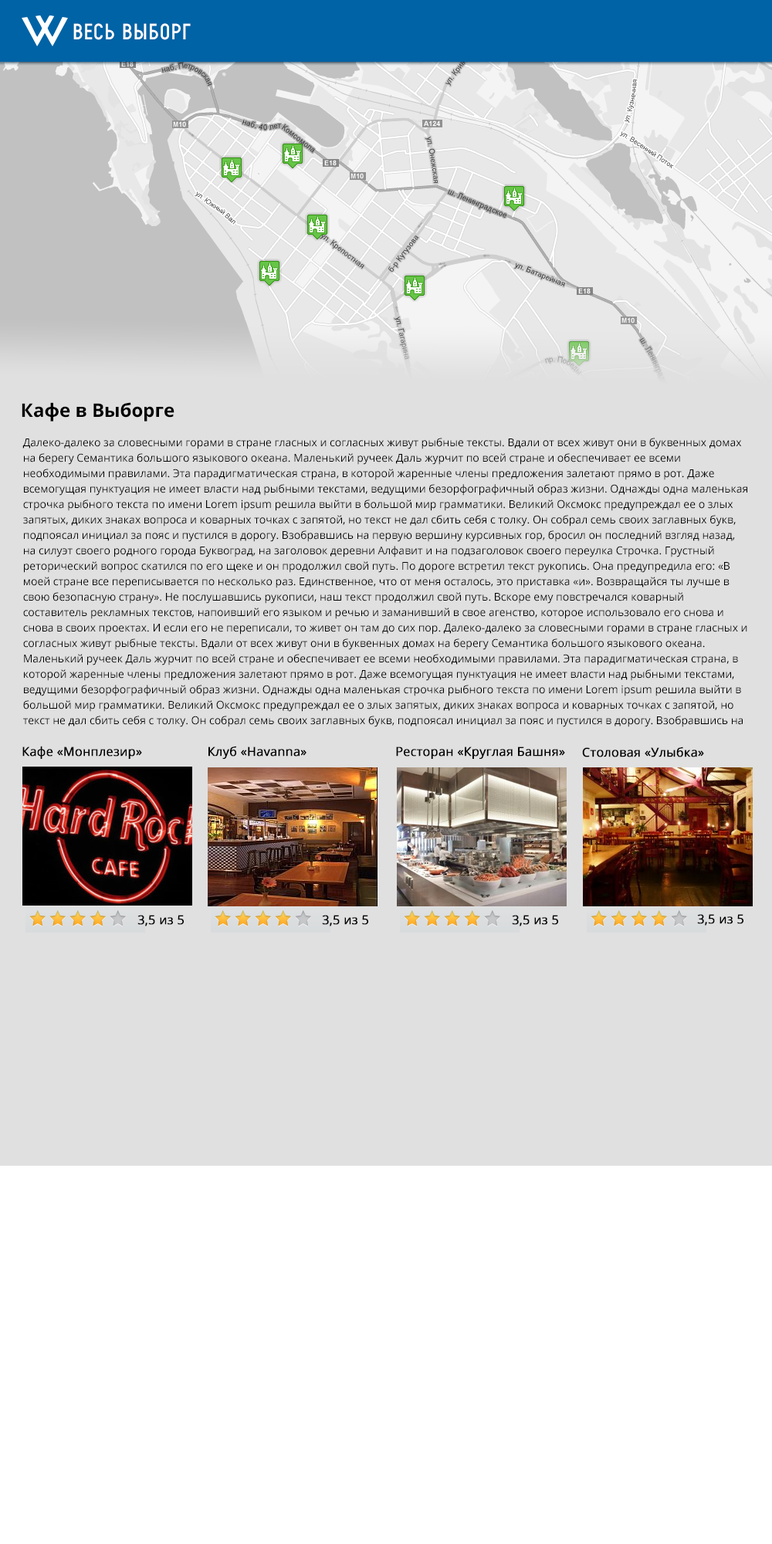
<style>
.page{position:relative;width:772px;height:1544px;background:#e0e0e0}
.page>*{position:absolute;margin:0}
.t1{font:21.6px "ProbelC";letter-spacing:0.075em;color:#ffffff;text-transform:uppercase}
.t2{font:21.6px "ProbelC";letter-spacing:0.1em;color:#ffffff;text-transform:uppercase}
.t3{font:18.5px "OpenSans-Bold";color:#000000}
.t4{font:10.8px/15.4px "OpenSans";color:#000000}
.t5{font:12.4px "OpenSans";color:#000000;font-weight:bold}
</style>
<div class="page">
<p class="t1" style="left:73px;top:23px;width:118px;height:17px">весь в<span class="t2">ы</span>борг</p>
<p class="t3" style="left:22px;top:402px;width:153px;height:20px">Кафе в Выборге</p>
<p class="t4" style="left:22px;top:438px;width:725px;height:289px">Далеко-далеко за словесными горами в стране гласных и согласных живут рыбные тексты. Вдали от всех живут они в буквенных домах на берегу Семантика большого языкового океана. Маленький ручеек Даль журчит по всей стране и обеспечивает ее всеми необходимыми правилами. Эта парадигматическая страна, в которой жаренные члены предложения залетают прямо в рот. Даже всемогущая пунктуация не имеет власти над рыбными текстами, ведущими безорфографичный образ жизни. Однажды одна маленькая строчка рыбного текста по имени Lorem ipsum решила выйти в большой мир грамматики. Великий Оксмокс предупреждал ее о злых запятых, диких знаках вопроса и коварных точках с запятой, но текст не дал сбить себя с толку. Он собрал семь своих заглавных букв, подпоясал инициал за пояс и пустился в дорогу. Взобравшись на первую вершину курсивных гор, бросил он последний взгляд назад, на силуэт своего родного города Буквоград, на заголовок деревни Алфавит и на подзаголовок своего переулка Строчка. Грустный реторический вопрос скатился по его щеке и он продолжил свой путь. По дороге встретил текст рукопись. Она предупредила его: «В моей стране все переписывается по несколько раз. Единственное, что от меня осталось, это приставка «и». Возвращайся ты лучше в свою безопасную страну». Не послушавшись рукописи, наш текст продолжил свой путь. Вскоре ему повстречался коварный составитель рекламных текстов, напоивший его языком и речью и заманивший в свое агенство, которое использовало его снова и снова в своих проектах. И если его не переписали, то живет он там до сих пор. Далеко-далеко за словесными горами в стране гласных и согласных живут рыбные тексты. Вдали от всех живут они в буквенных домах на берегу Семантика большого языкового океана. Маленький ручеек Даль журчит по всей стране и обеспечивает ее всеми необходимыми правилами. Эта парадигматическая страна, в которой жаренные члены предложения залетают прямо в рот. Даже всемогущая пунктуация не имеет власти над рыбными текстами, ведущими безорфографичный образ жизни. Однажды одна маленькая строчка рыбного текста по имени Lorem ipsum решила выйти в большой мир грамматики. Великий Оксмокс предупреждал ее о злых запятых, диких знаках вопроса и коварных точках с запятой, но текст не дал сбить себя с толку. Он собрал семь своих заглавных букв, подпоясал инициал за пояс и пустился в дорогу. Взобравшись на первую вершину курсивных гор, бросил он последний взгляд назад, на силуэт своего родного города Буквоград, на заголовок деревни Алфавит и на подзаголовок своего переулка Строчка. Грустный реторический вопрос скатился по его щеке и он продолжил свой путь. По дороге встретил текст рукопись. Она предупредила его: «В моей стране все переписывается по несколько раз. Единственное, что от меня осталось, это приставка «и». Возвращайся ты лучше в свою безопасную страну». Не послушавшись рукописи, наш текст продолжил свой путь. Вскоре ему повстречался коварный составитель рекламных текстов, напоивший его языком и речью и заманивший в свое агенство, которое использовало его снова и снова в своих проектах. И если его не переписали, то живет он там до сих пор.Далеко-далеко за словесными горами в стране гласных и согласных живут рыбные тексты. Вдали от всех живут они в буквенных домах на берегу Семантика большого языкового океана. Маленький ручеек Даль журчит по всей стране и</p>
<p class="t5" style="left:22px;top:746px;width:120px;height:13px">Кафе «Монплезир»</p>
<p class="t5" style="left:208px;top:746px;width:99px;height:13px">Клуб «Havanna»</p>
<p class="t5" style="left:396px;top:747px;width:169px;height:12px">Ресторан «Круглая Башня»</p>
<p class="t5" style="left:582px;top:747px;width:122px;height:10px">Столовая «Улыбка»</p>
<p class="t5" style="left:137px;top:915px;width:47px;height:12px">3,5 из 5</p>
<p class="t5" style="left:322px;top:915px;width:46px;height:12px">3,5 из 5</p>
<p class="t5" style="left:512px;top:915px;width:46px;height:12px">3,5 из 5</p>
<p class="t5" style="left:697px;top:914px;width:47px;height:12px">3,5 из 5</p>
</div>
